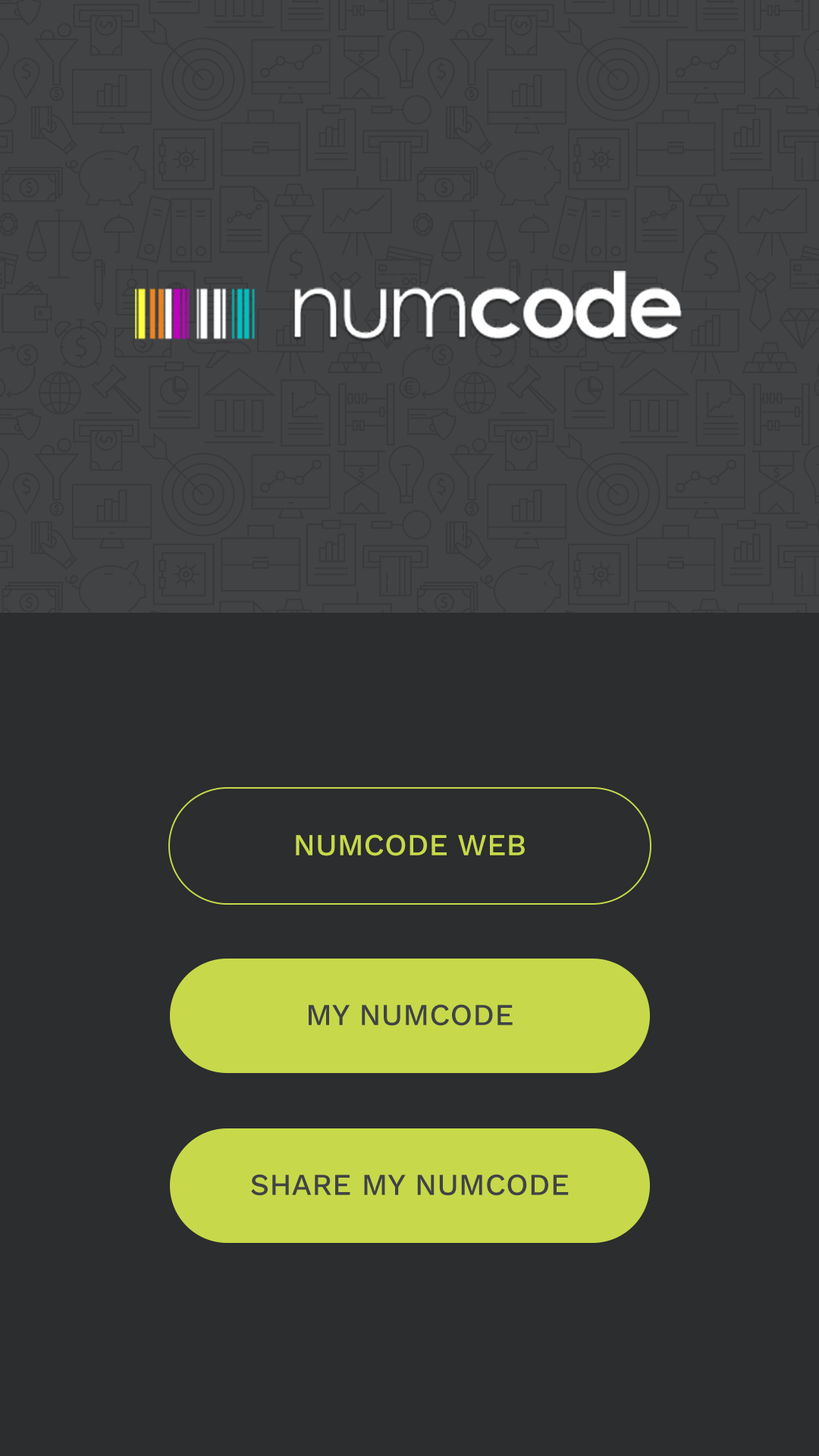
<style>
.page{position:relative;width:819px;height:1456px;background:#2b2d2e}
.page>*{position:absolute;margin:0}
.t1{font:30.3px "WorkSans-Medium";color:#c7d94a}
.t2{font:30.3px "WorkSans-Medium";color:#414345}
</style>
<div class="page">
<p class="t1" style="left:296px;top:834px;width:229px;height:22px">NUMCODE WEB</p>
<p class="t2" style="left:309px;top:1004px;width:204px;height:22px">MY NUMCODE</p>
<p class="t2" style="left:251px;top:1174px;width:318px;height:22px">SHARE MY NUMCODE</p>
</div>
